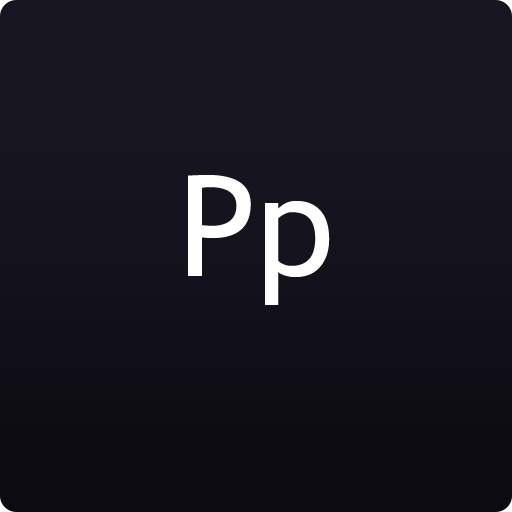
<style>
.page{position:relative;width:512px;height:512px;background:#171520}
.page>*{position:absolute;margin:0}
.t1{font:140px "TrebuchetMS";color:#ffffff}
</style>
<div class="page">
<p class="t1" style="left:188px;top:175px;width:142px;height:130px">Pp</p>
</div>
